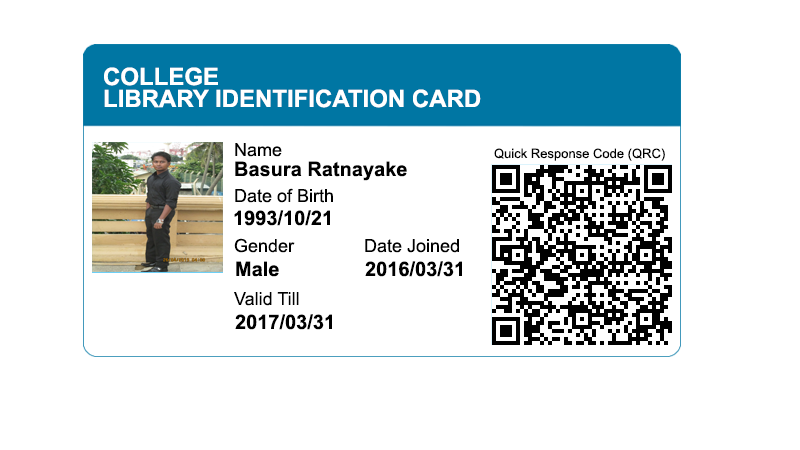
<style>
.page{position:relative;width:800px;height:450px;background:#ffffff}
.page>*{position:absolute;margin:0}
.t1{font:24px "Arial-BoldMT";color:#ffffff}
.t2{font:18px "ArialMT";color:#000000}
.t3{font:13px "ArialMT";color:#000000}
.t4{font:20px "Arial-BoldMT";color:#000000}
</style>
<div class="page">
<p class="t1" style="left:104px;top:67px;width:114px;height:19px">COLLEGE</p>
<p class="t1" style="left:104px;top:89px;width:377px;height:19px">LIBRARY IDENTIFICATION CARD</p>
<p class="t2" style="left:235px;top:143px;width:47px;height:14px">Name</p>
<p class="t3" style="left:494px;top:148px;width:171px;height:13px">Quick Response Code (QRC)</p>
<p class="t4" style="left:235px;top:161px;width:172px;height:20px">Basura Ratnayake</p>
<p class="t2" style="left:235px;top:188px;width:98px;height:15px">Date of Birth</p>
<p class="t4" style="left:234px;top:210px;width:96px;height:16px">1993/10/21</p>
<p class="t2" style="left:234px;top:238px;width:61px;height:15px">Gender</p>
<p class="t2" style="left:365px;top:239px;width:94px;height:14px">Date Joined</p>
<p class="t4" style="left:236px;top:261px;width:43px;height:16px">Male</p>
<p class="t4" style="left:365px;top:261px;width:97px;height:16px">2016/03/31</p>
<p class="t2" style="left:234px;top:292px;width:65px;height:14px">Valid Till</p>
<p class="t4" style="left:235px;top:314px;width:97px;height:16px">2017/03/31</p>
</div>
